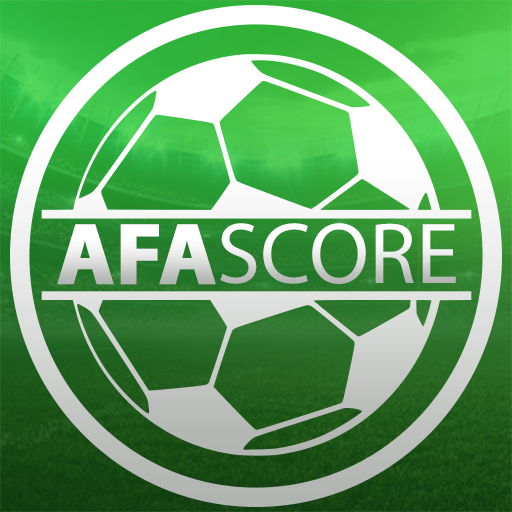
<style>
.page{position:relative;width:512px;height:512px}
.page>*{position:absolute;margin:0}
.t1{font:87px "MyriadPro-Regular"}
.t2{font:87px "MyriadPro-Bold";font-weight:bold}
</style>
<div class="page">
<p class="t1" style="left:57px;top:223px;width:399px;height:62px"><span class="t2">AFA</span>SCORE</p>
</div>
